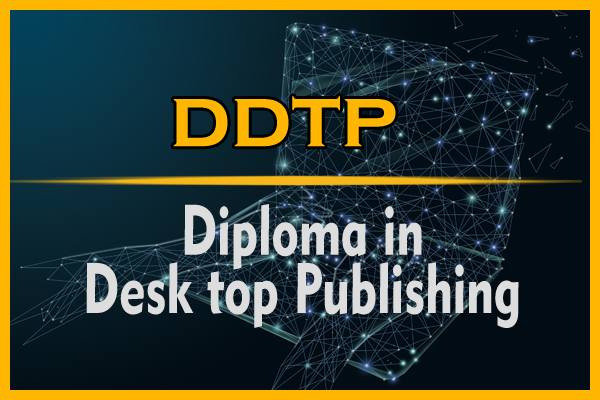
<style>
.page{position:relative;width:600px;height:400px}
.page>*{position:absolute;margin:0}
.t1{font:86.5px "CopperplateGothic-Bold";color:#ffb600}
.t2{font:70.7px/58.3px "Geometric415BT-BlackA";color:#dedddd;scale:0.71 1}
</style>
<div class="page">
<p class="t1" style="left:173px;top:96px;width:223px;height:51px">ddtp</p>
<p class="t2" style="left:86px;top:204px;width:433px;height:124px;text-align:center">Diploma in<br>Desk top Publishing</p>
</div>
